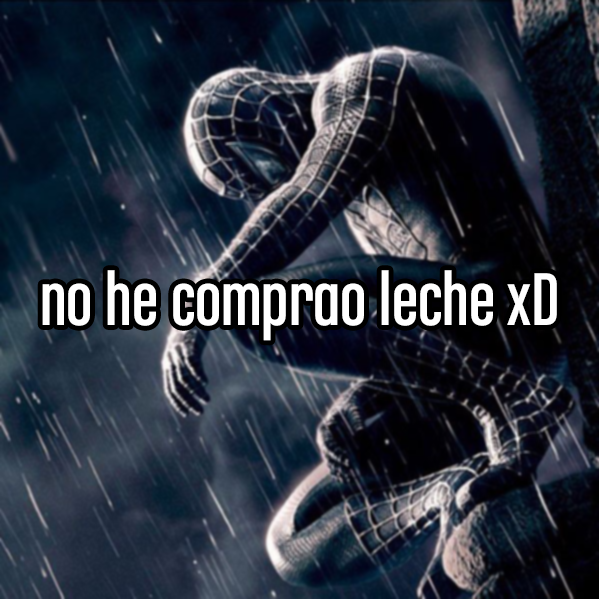
<style>
.page{position:relative;width:599px;height:599px}
.page>*{position:absolute;margin:0}
.t1{font:79.2px "ChaletComprime-CologneEighty";color:#ffffff}
</style>
<div class="page">
<p class="t1" style="left:42px;top:270px;width:515px;height:71px">no he comprao leche xD</p>
</div>
